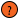
<style>
.page{position:relative;width:20px;height:20px;background:#ffffff}
.page>*{position:absolute;margin:0}
.t1{font:12.5px "MyriadPro-Regular";color:#000001}
</style>
<div class="page">
<p class="t1" style="left:7px;top:6px;width:5px;height:9px">?</p>
</div>
